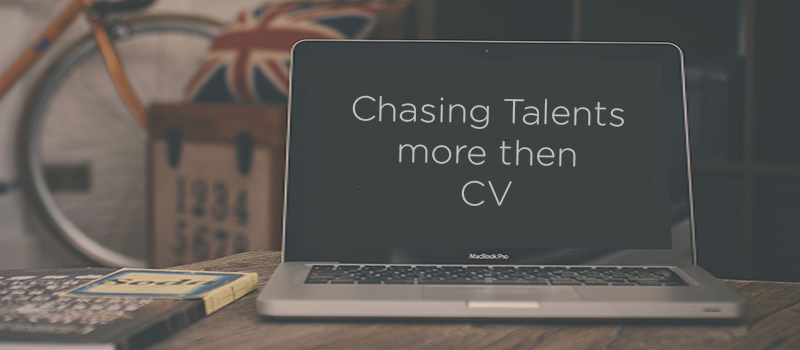
<style>
.page{position:relative;width:800px;height:350px;background:#3d4343}
.page>*{position:absolute;margin:0}
.t1{font:34.3px "GothamRounded-Light";color:#c1c2c2;scale:1.05 1}
</style>
<div class="page">
<p class="t1" style="left:352px;top:95px;width:272px;height:111px;text-align:center;rotate:1deg">Chasing Talents<br>more then<br>CV</p>
</div>
